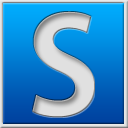
<style>
.page{position:relative;width:128px;height:128px}
.page>*{position:absolute;margin:0}
.t1{font:133.3px "AdobeGothicStd-Bold";color:#e0e0e0}
</style>
<div class="page">
<p class="t1" style="left:32px;top:11px;width:63px;height:107px">S</p>
</div>
